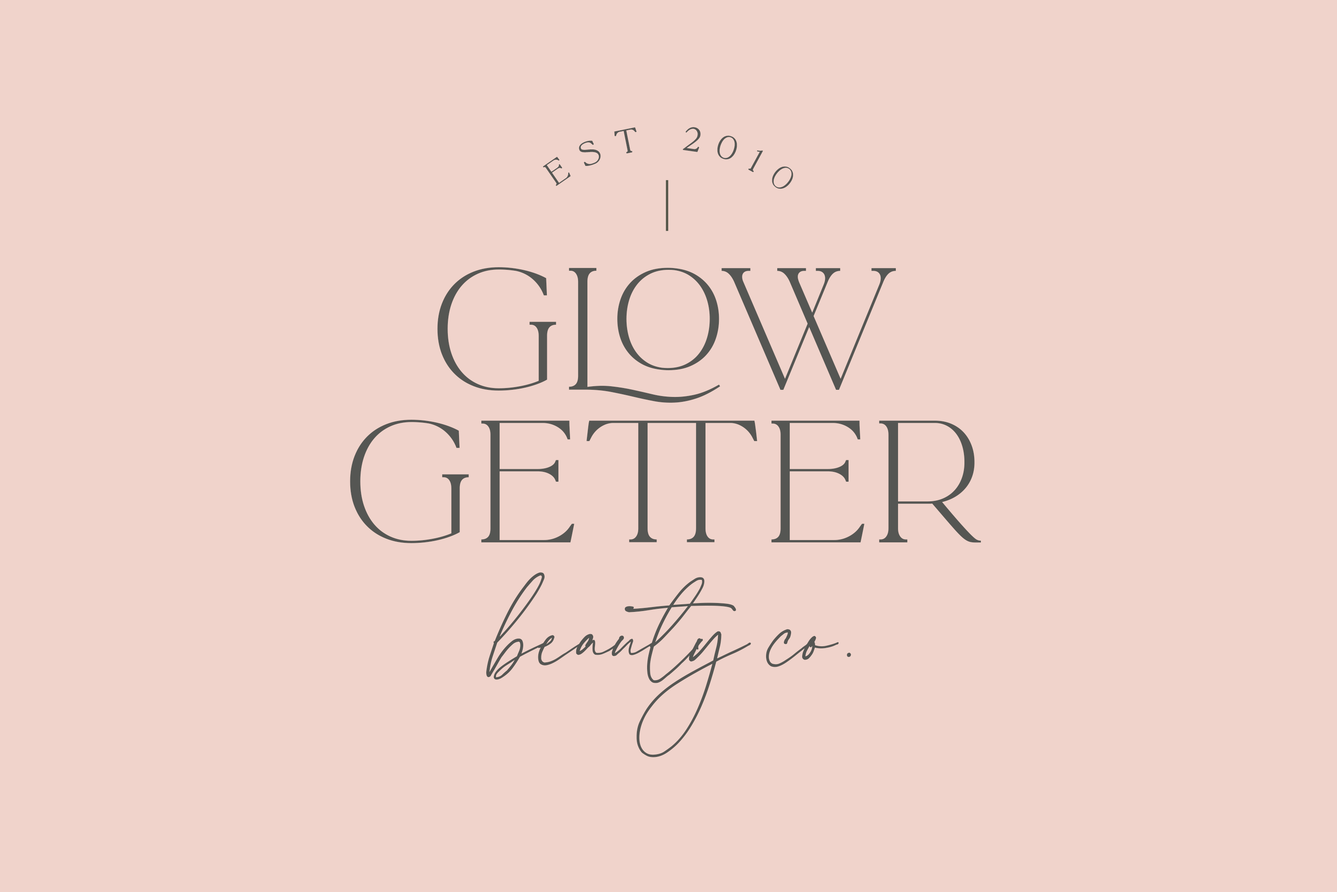
<style>
.page{position:relative;width:1337px;height:892px;background:#f0d3cb}
.page>*{position:absolute;margin:0}
.t1{font:28.8px/66px "LaLuxesSerif";letter-spacing:0.51em;color:#555653;font-weight:bold}
.t2{font:151.9px/152.3px "LaLuxesSerif";color:#555653}
.t3{font:169.8px "LaLuxesScript";color:#555653}
.t4{font:169.8px "LaLuxesScript";letter-spacing:-0.12em;color:#555653}
</style>
<div class="page">
<p class="t1" style="left:543px;top:127px;width:251px;height:62px;text-align:center">est 2010</p>
<p class="t2" style="left:350px;top:267px;width:631px;height:276px;text-align:center">glow<br>getter</p>
<p class="t3" style="left:486px;top:572px;width:365px;height:185px">beaut<span class="t4">y</span> co.</p>
</div>
